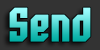
<style>
.page{position:relative;width:100px;height:50px;background:#333333}
.page>*{position:absolute;margin:0}
.t1{font:47.9px "Whitestone-Bold"}
</style>
<div class="page">
<p class="t1" style="left:9px;top:7px;width:82px;height:35px">Send</p>
</div>
